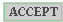
<style>
.page{position:relative;width:63px;height:22px;background:#cfcece}
.page>*{position:absolute;margin:0}
.t1{font:14px "NuevaStd-Bold";color:#4b4b4b}
</style>
<div class="page">
<p class="t1" style="left:9px;top:7px;width:9px;height:9px">A</p>
<p class="t1" style="left:18px;top:7px;width:15px;height:9px">CC</p>
<p class="t1" style="left:34px;top:7px;width:7px;height:9px">E</p>
<p class="t1" style="left:42px;top:7px;width:16px;height:9px">PT</p>
</div>
